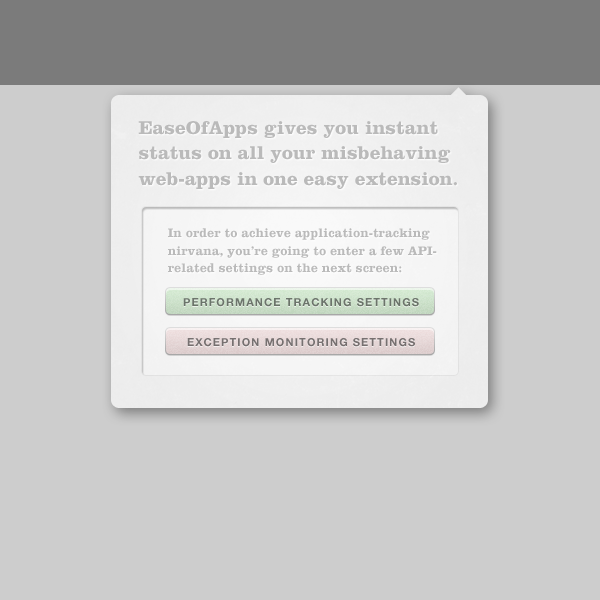
<style>
.page{position:relative;width:600px;height:600px;background:#cdcdcd}
.page>*{position:absolute;margin:0}
.t1{font:19.4px/25.3px "ClarendonLTStd-Bold";color:#bababa}
.t2{font:12.8px/17.5px "ClarendonLTStd-Bold";color:#bababa}
.t3{font:11px "HelveticaNeue-Bold";letter-spacing:0.1em;color:#6c746a;text-transform:uppercase}
.t4{font:11px "HelveticaNeue-Bold";letter-spacing:0.1em;color:#777070;text-transform:uppercase}
</style>
<div class="page">
<p class="t1" style="left:138px;top:121px;width:319px;height:68px">EaseOfApps gives you instant status on all your misbehaving web-apps in one easy extension.</p>
<p class="t2" style="left:168px;top:228px;width:269px;height:47px">In order to achieve application-tracking nirvana, you’re going to enter a few API-related settings on the next screen:</p>
<p class="t3" style="left:183px;top:298px;width:236px;height:9px">Performance Tracking Settings</p>
<p class="t4" style="left:187px;top:338px;width:228px;height:9px">Exception Monitoring Settings</p>
</div>
